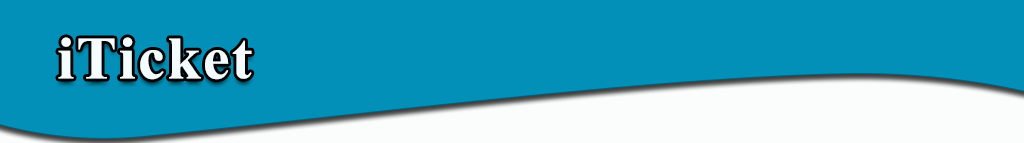
<style>
.page{position:relative;width:1024px;height:143px;background:#0390b8}
.page>*{position:absolute;margin:0}
.t1{font:60px "TimesNewRomanPS-BoldMT";letter-spacing:0.04em;color:#fafcfc}
</style>
<div class="page">
<p class="t1" style="left:58px;top:37px;width:194px;height:43px">iTicket</p>
</div>
